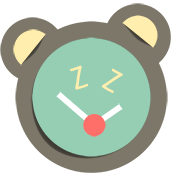
<style>
.page{position:relative;width:176px;height:176px;background:#96ceb4}
.page>*{position:absolute;margin:0}
.t1{font:27.7px "ClaireHand-Bold";color:#ffeead}
</style>
<div class="page">
<p class="t1" style="left:69px;top:65px;width:19px;height:25px">Z</p>
<p class="t1" style="left:101px;top:68px;width:22px;height:25px">Z</p>
</div>
